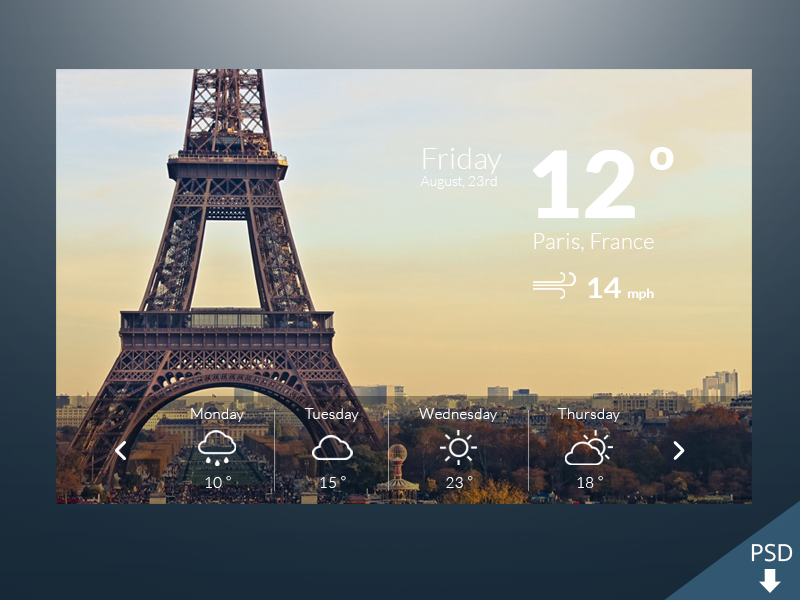
<style>
.page{position:relative;width:800px;height:600px}
.page>*{position:absolute;margin:0}
.t1{font:14px "Lato-Light";color:#ffffff}
.t2{font:30px "Lato-Light";color:#ffffff}
.t3{font:92.4px "Lato-Black";color:#ffffff;scale:1.05 1}
.t4{font:44.5px "Lato-Black";color:#ffffff}
.t5{font:22.2px "Lato-Light";color:#ffffff}
.t6{font:13px "Lato-Bold";color:#ffffff;scale:1.05 1}
.t7{font:29.3px "Lato-Bold";color:#ffffff;scale:1.05 1}
.t8{font:15.4px "Lato-Light";color:#ffffff}
.t9{font:7.7px "Lato-Light";color:#ffffff}
.t10{font:23.6px "OpenSans";color:#ffffff}
</style>
<div class="page">
<p class="t1" style="left:420px;top:147px;width:82px;height:42px"><span class="t2">Friday<br></span>August, 23rd</p>
<p class="t3" style="left:532px;top:150px;width:103px;height:68px">12</p>
<p class="t4" style="left:650px;top:147px;width:24px;height:23px">o</p>
<p class="t5" style="left:534px;top:233px;width:120px;height:19px">Paris, France</p>
<p class="t6" style="left:588px;top:277px;width:66px;height:23px"><span class="t7">14 </span>mph</p>
<p class="t8" style="left:191px;top:408px;width:53px;height:14px">Monday</p>
<p class="t8" style="left:304px;top:408px;width:55px;height:14px">Tuesday</p>
<p class="t8" style="left:419px;top:408px;width:78px;height:14px">Wednesday</p>
<p class="t8" style="left:557px;top:408px;width:63px;height:14px">Thursday</p>
<p class="t8" style="left:205px;top:476px;width:26px;height:12px">10 <span class="t9">o</span></p>
<p class="t8" style="left:320px;top:476px;width:26px;height:12px">15 <span class="t9">o</span></p>
<p class="t8" style="left:446px;top:476px;width:27px;height:12px">23 <span class="t9">o</span></p>
<p class="t8" style="left:577px;top:476px;width:26px;height:12px">18 <span class="t9">o</span></p>
<p class="t10" style="left:751px;top:543px;width:42px;height:19px">PSD</p>
</div>
